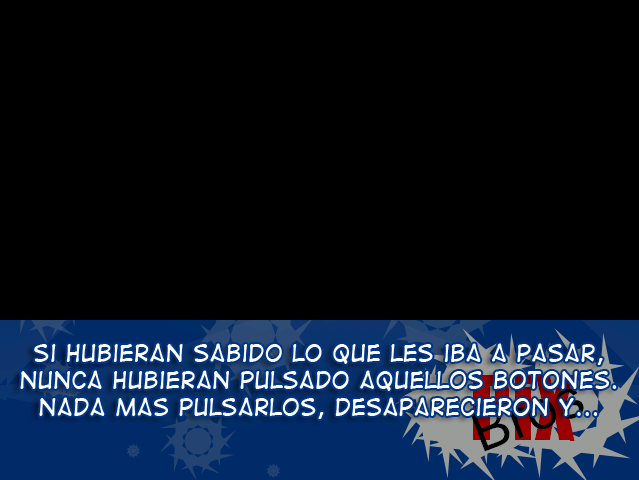
<style>
.page{position:relative;width:639px;height:480px;background:#000000}
.page>*{position:absolute;margin:0}
.t1{font:22.4px "DigitalStrip2";color:#ffffff}
</style>
<div class="page">
<p class="t1" style="left:20px;top:343px;width:597px;height:76px;text-align:center">Si hubieran sabido lo que les iba a pasar, <br>nunca hubieran pulsado aquellos botones. <br>Nada mas pulsarlos, desaparecieron y...</p>
</div>
